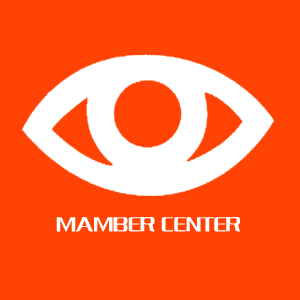
<style>
.page{position:relative;width:300px;height:300px;background:#ff4304}
.page>*{position:absolute;margin:0}
.t1{font:21.8px "FZCQJW--GB1-0";color:#ffffff}
</style>
<div class="page">
<p class="t1" style="left:56px;top:217px;width:185px;height:15px">MAMBER CENTER</p>
</div>
